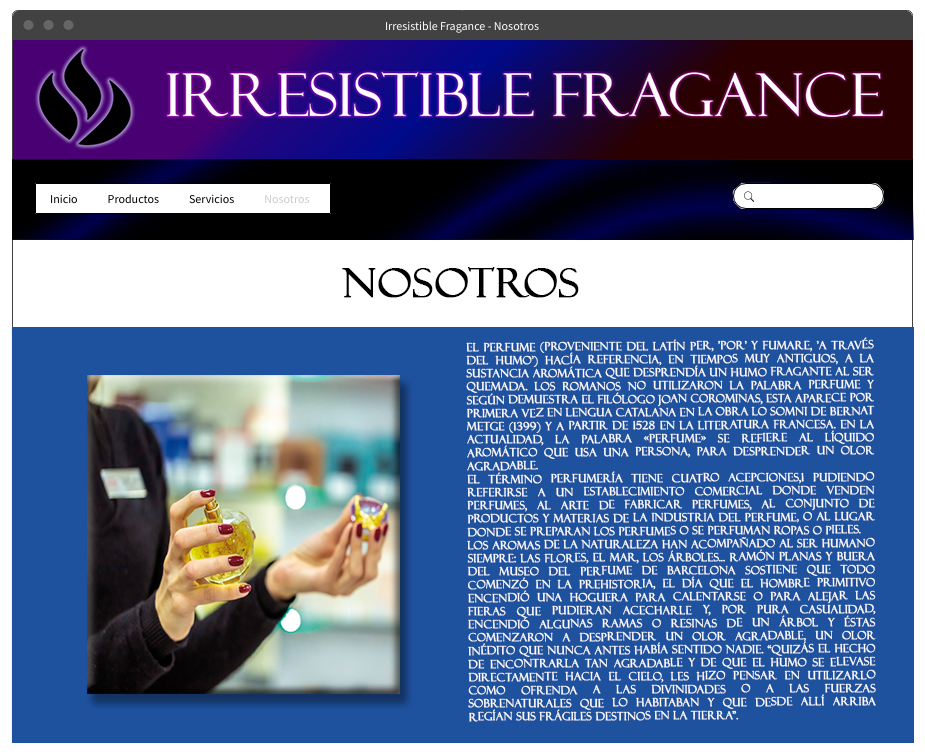
<style>
.page{position:relative;width:925px;height:755px;background:#1e519e}
.page>*{position:absolute;margin:0}
.t1{font:40px "FelixTitlingMT";color:#000000;font-weight:bold;scale:1.05 1}
.t2{font:11px "FelixTitlingMT";color:#ffffff;font-weight:bold}
</style>
<div class="page">
<p class="t1" style="left:342px;top:267px;width:237px;height:31px">NOSOTROS</p>
<p class="t2" style="left:466px;top:337px;width:410px;height:385px;text-align:justify">El perfume (proveniente del latín per, 'por' y fumare, 'a través del humo') hacía referencia, en tiempos muy antiguos, a la sustancia aromática que desprendía un humo fragante al ser quemada. Los romanos no utilizaron la palabra perfume y según demuestra el filólogo Joan Corominas, esta aparece por primera vez en lengua catalana en la obra Lo Somni de Bernat Metge (1399) y a partir de 1528 en la literatura francesa. En la actualidad, la palabra «perfume» se refiere al líquido aromático que usa una persona, para desprender un olor agradable.<br>El término perfumería tiene cuatro acepciones,1​ pudiendo referirse a un establecimiento comercial donde venden perfumes, al arte de fabricar perfumes, al conjunto de productos y materias de la industria del perfume, o al lugar donde se preparan los perfumes o se perfuman ropas o pieles.<br>Los aromas de la naturaleza han acompañado al ser humano siempre: las flores, el mar, los árboles... Ramón Planas y Buera del Museo del Perfume de Barcelona sostiene que todo comenzó en la prehistoria, el día que el hombre primitivo encendió una hoguera para calentarse o para alejar las fieras que pudieran acecharle y, por pura casualidad, encendió algunas ramas o resinas de un árbol y éstas comenzaron a desprender un olor agradable, un olor inédito que nunca antes había sentido nadie. “Quizás el hecho de encontrarla tan agradable y de que el humo se elevase directamente hacia el cielo, les hizo pensar en utilizarlo como ofrenda a las divinidades o a las fuerzas sobrenaturales que lo habitaban y que desde allí arriba regían sus frágiles destinos en la Tierra”.</p>
</div>
